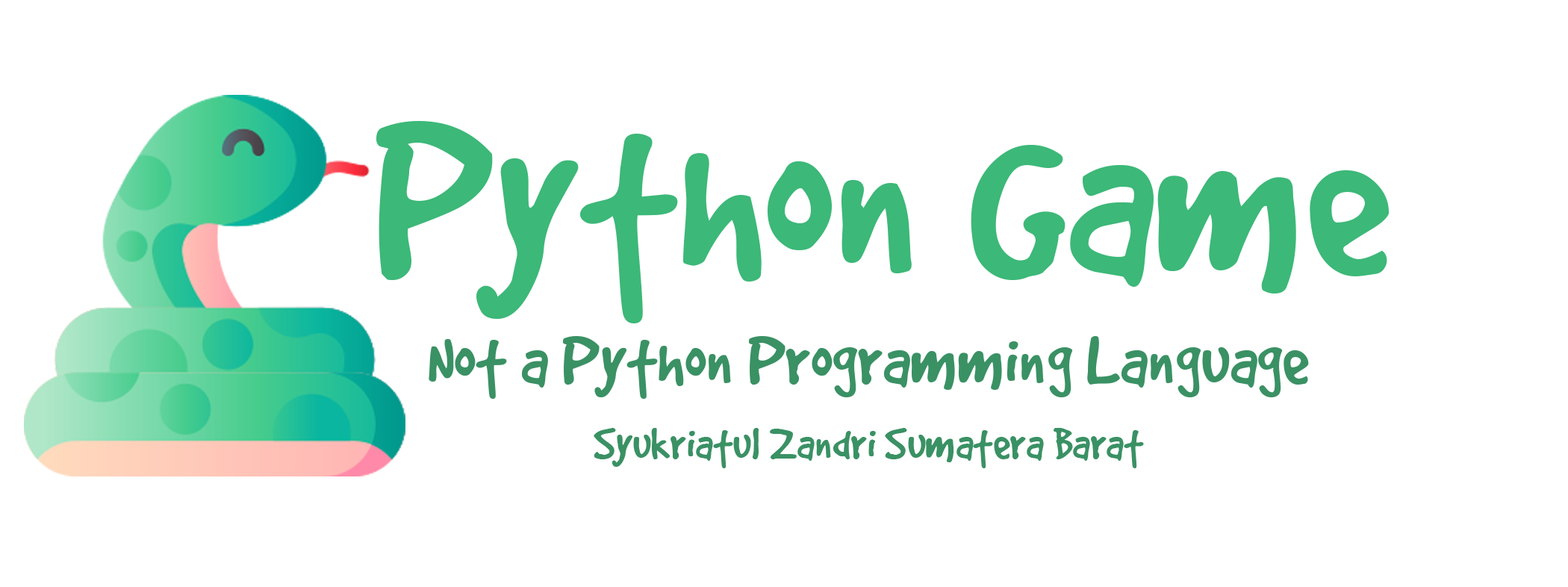
<style>
.page{position:relative;width:1568px;height:587px;background:#ffffff}
.page>*{position:absolute;margin:0}
.t1{font:248.9px "GoodDogPlain";color:#3cb878}
.t2{font:77.8px "GoodDogPlain";color:#3a9164}
.t3{font:49.8px "GoodDogPlain";color:#3a9164}
</style>
<div class="page">
<p class="t1" style="left:376px;top:121px;width:1013px;height:202px">Python Game</p>
<p class="t2" style="left:429px;top:336px;width:880px;height:63px">Not a Python Programming Language</p>
<p class="t3" style="left:594px;top:428px;width:550px;height:40px">Syukriatul Zandri Sumatera Barat</p>
</div>
